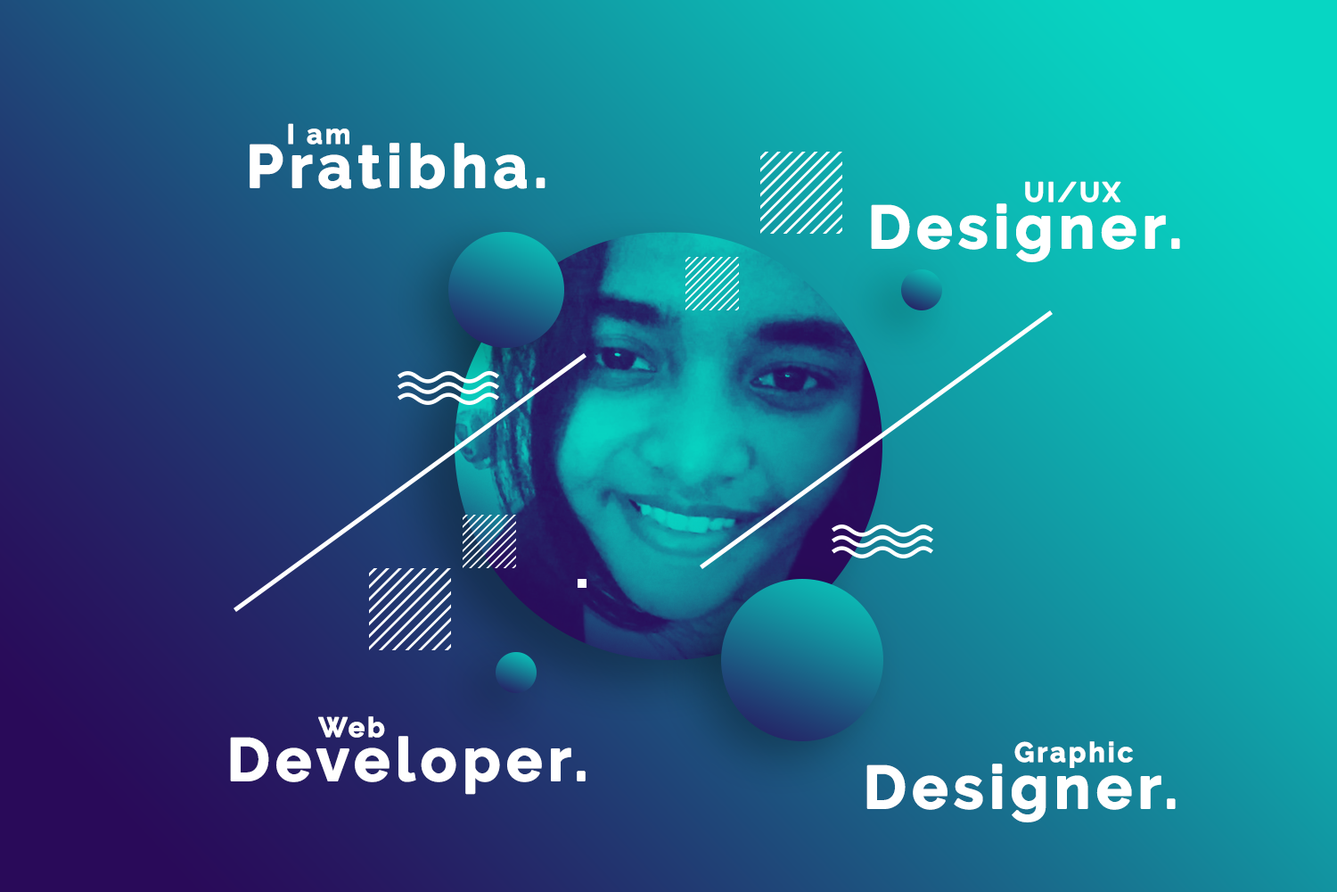
<style>
.page{position:relative;width:1337px;height:892px}
.page>*{position:absolute;margin:0}
.t1{font:27.2px "Raleway-Bold";letter-spacing:0.075em;color:#ffffff;font-weight:bold}
.t2{font:59.4px "Raleway-Bold";letter-spacing:0.075em;color:#ffffff;font-weight:bold}
</style>
<div class="page">
<p class="t1" style="left:288px;top:123px;width:62px;height:21px">I am</p>
<p class="t2" style="left:250px;top:143px;width:296px;height:46px">Pratibha.</p>
<p class="t1" style="left:1025px;top:181px;width:97px;height:21px">UI/UX</p>
<p class="t2" style="left:871px;top:203px;width:309px;height:59px">Designer.</p>
<p class="t1" style="left:318px;top:716px;width:67px;height:21px">Web</p>
<p class="t2" style="left:230px;top:736px;width:356px;height:58px">Developer.</p>
<p class="t1" style="left:1015px;top:741px;width:118px;height:27px">Graphic</p>
<p class="t2" style="left:867px;top:763px;width:309px;height:59px">Designer.</p>
</div>
